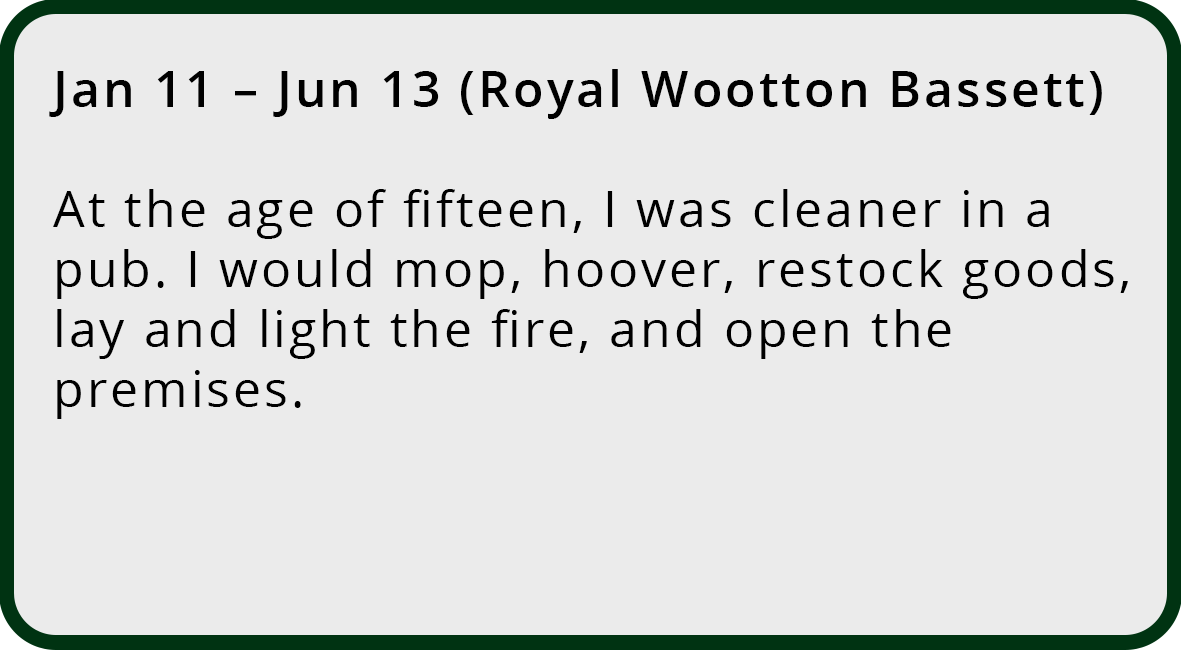
<style>
.page{position:relative;width:1181px;height:650px;background:#ebebeb}
.page>*{position:absolute;margin:0}
.t1{font:50px "OpenSans-Regular";letter-spacing:0.06em;color:#000000}
.t2{font:50px "OpenSans-SemiBold";letter-spacing:0.06em;color:#000000}
</style>
<div class="page">
<p class="t1" style="left:49px;top:69px;width:1079px;height:350px"><span class="t2">Jan 11 – Jun 13 (Royal Wootton Bassett)<br><br></span>At the age of fifteen, I was cleaner in a pub. I would mop, hoover, restock goods, lay and light the fire, and open the premises.</p>
</div>
